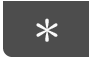
<style>
.page{position:relative;width:90px;height:60px;background:#4d4d4d}
.page>*{position:absolute;margin:0}
.t1{font:36px "DFKaiShu-SB-Estd-BF";color:#fafafa}
</style>
<div class="page">
<p class="t1" style="left:36px;top:18px;width:22px;height:24px">＊</p>
</div>
